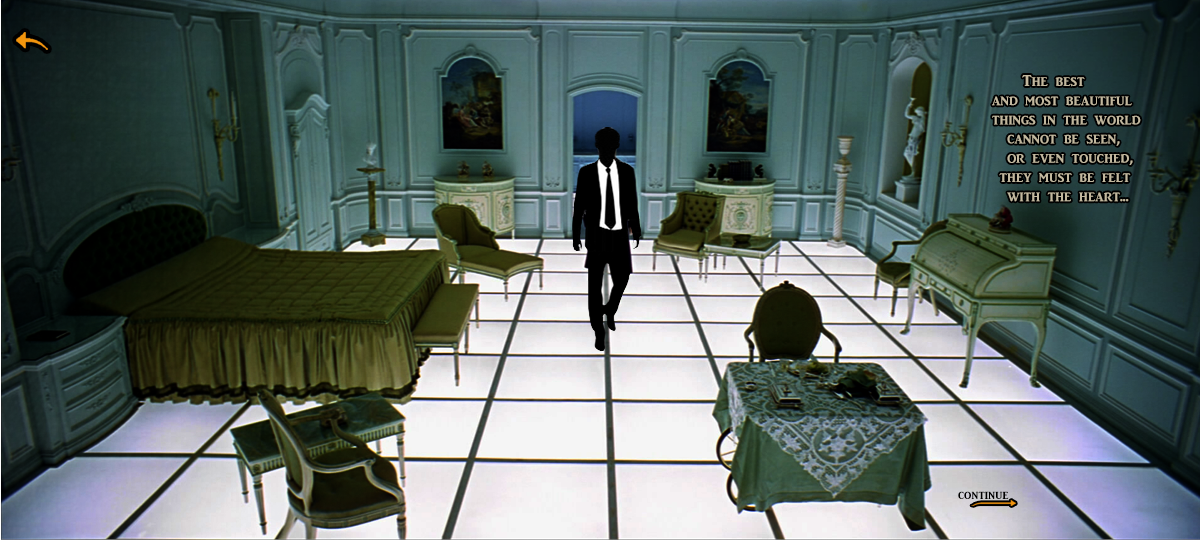
<style>
.page{position:relative;width:1200px;height:540px}
.page>*{position:absolute;margin:0}
.t1{font:16px "ARJULIAN";color:#c2b89f}
.t2{font:13.3px "ARJULIAN";color:#000000}
</style>
<div class="page">
<p class="t1" style="left:992px;top:75px;width:149px;height:127px">The best<br>and most beautiful<br>things in the world<br>  cannot be seen,<br>  or even touched,<br> they must be felt<br>  with the heart...</p>
<p class="t2" style="left:958px;top:491px;width:51px;height:8px">continue</p>
</div>
